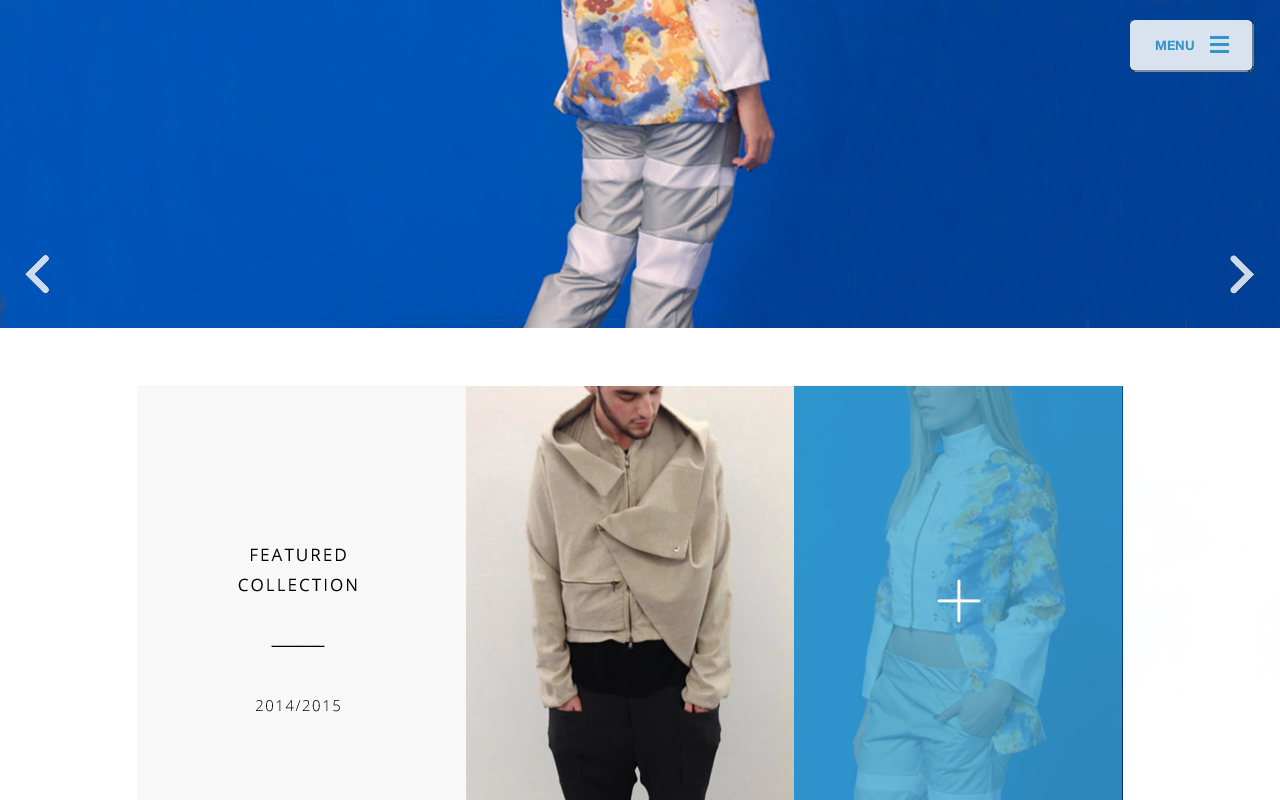
<style>
.page{position:relative;width:1280px;height:800px}
.page>*{position:absolute;margin:0}
.t1{font:17px/30px "OpenSans";letter-spacing:0.12em;color:#000000}
.t2{font:17px/30px "OpenSans";letter-spacing:-0.1em;color:#000000}
.t3{font:15px/30px "OpenSans-Light";letter-spacing:0.1em;color:#000000}
</style>
<div class="page">
<p class="t1" style="left:238px;top:548px;width:119px;height:164px;text-align:center">FEATURED<br>COLLECTION<br><br><span class="t2">--------------<br><br></span><span class="t3">2014/2015</span></p>
</div>
